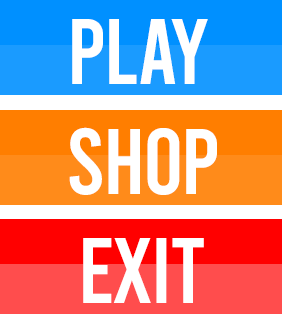
<style>
.page{position:relative;width:282px;height:314px;background:#ffffff}
.page>*{position:absolute;margin:0}
.t1{font:93px "Bebas-Regular";letter-spacing:-0.025em;color:#ffffff}
</style>
<div class="page">
<p class="t1" style="left:72px;top:19px;width:136px;height:65px">play</p>
<p class="t1" style="left:69px;top:127px;width:148px;height:68px">Shop</p>
<p class="t1" style="left:83px;top:238px;width:121px;height:65px">Exit</p>
</div>
